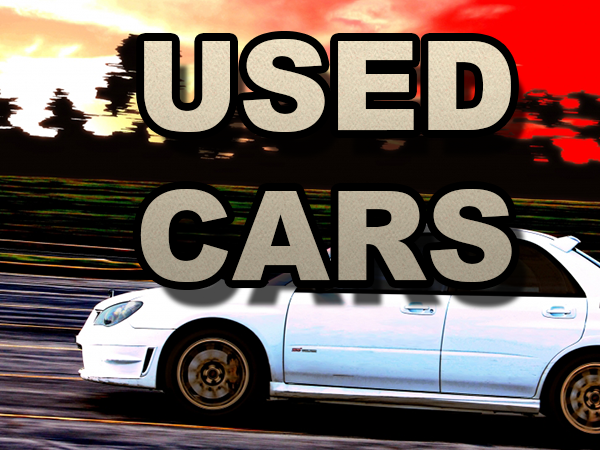
<style>
.page{position:relative;width:600px;height:450px}
.page>*{position:absolute;margin:0}
.t1{font:125px "Arial-Black"}
</style>
<div class="page">
<p class="t1" style="left:140px;top:39px;width:372px;height:243px">USED<br>CARS</p>
</div>
